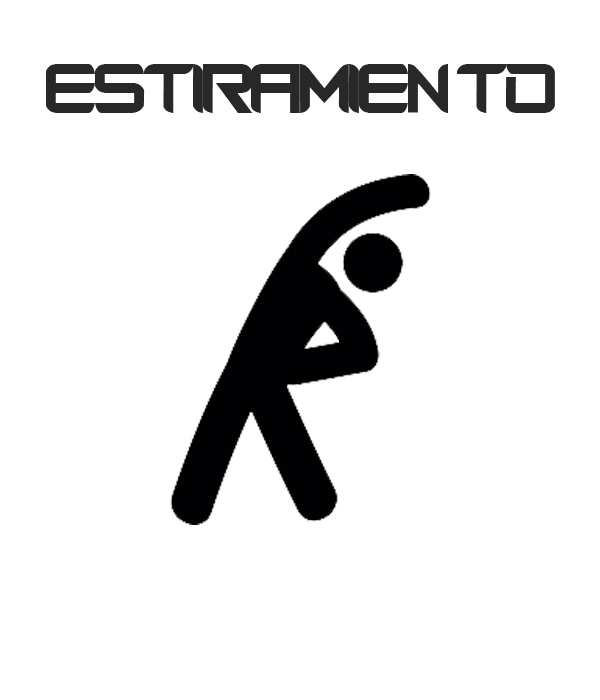
<style>
.page{position:relative;width:600px;height:700px;background:#ffffff}
.page>*{position:absolute;margin:0}
.t1{font:61px "Amazing-Spider-Man";color:#282828}
</style>
<div class="page">
<p class="t1" style="left:46px;top:64px;width:509px;height:49px">ESTIRAMIENTO</p>
</div>
